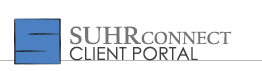
<style>
.page{position:relative;width:262px;height:71px;background:#ffffff}
.page>*{position:absolute;margin:0}
.t1{font:18px/16px "CenturyGothic";color:#404040;font-variant:small-caps}
.t2{font:26px/16px "CalifornianFB-Bold";color:#747474;font-variant:small-caps}
</style>
<div class="page">
<p class="t1" style="left:69px;top:26px;width:163px;height:35px"><span class="t2">SUHRconnect<br></span>CLIENT PORTAL</p>
</div>
